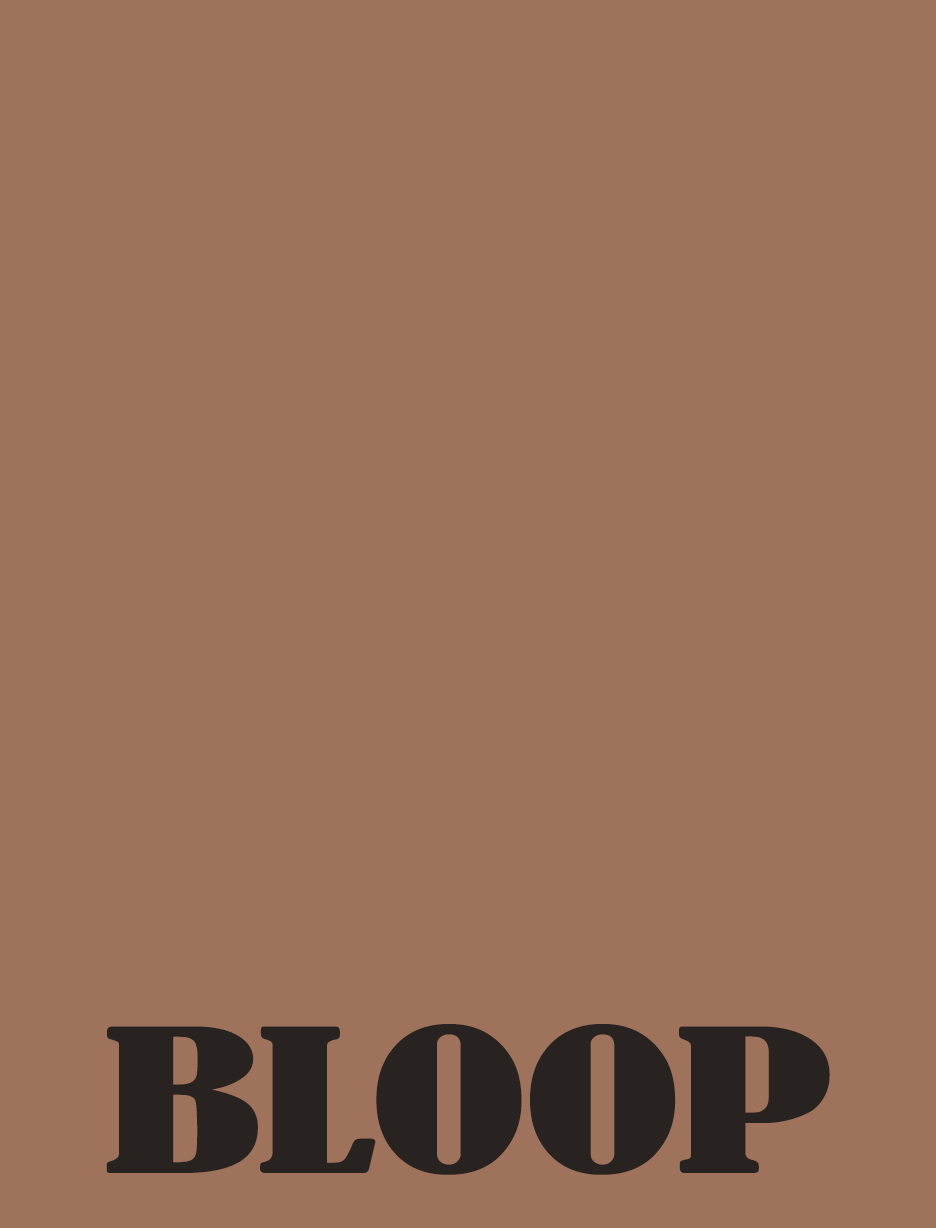
<style>
.page{position:relative;width:936px;height:1228px;background:#9f735b}
.page>*{position:absolute;margin:0}
.t1{font:186px "BernardMT-Condensed";letter-spacing:-0.01em;color:#16171a;scale:1.6 1}
</style>
<div class="page">
<p class="t1" style="left:106px;top:1024px;width:724px;height:151px;opacity:0.92">BLOOP</p>
</div>
